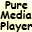
<style>
.page{position:relative;width:32px;height:32px;background:#ffffd7}
.page>*{position:absolute;margin:0}
.t1{font:11px/1.1px "ComicSansMS-Bold";color:#000000}
</style>
<div class="page">
<p class="t1" style="left:0px;top:1px;width:33px;height:32px">Pure <br> <br><br><br>  <br><br><br><br><br>Media<br><br><br><br><br><br><br><br><br><br>Player</p>
</div>
